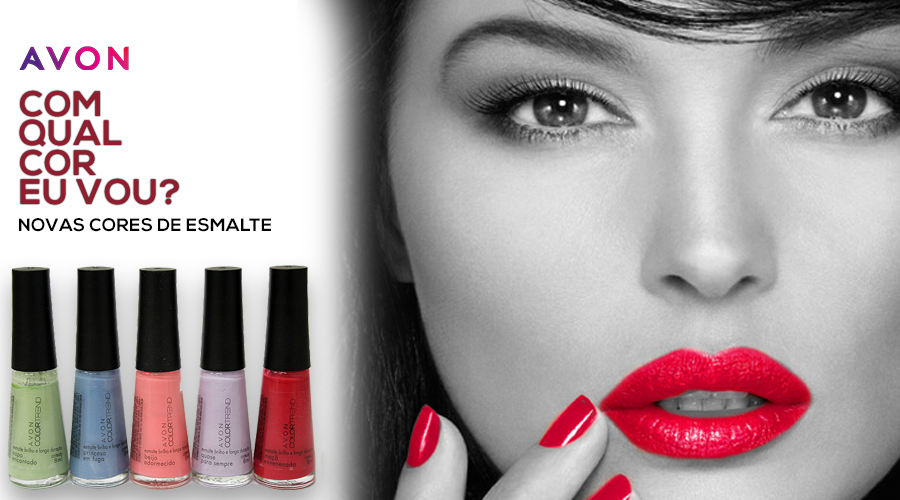
<style>
.page{position:relative;width:900px;height:500px}
.page>*{position:absolute;margin:0}
.t1{font:35.5px/29.3px "NexaBold";letter-spacing:0.02em;color:#901e2e}
.t2{font:18px "NexaBold";letter-spacing:0.02em;color:#000000}
</style>
<div class="page">
<p class="t1" style="left:19px;top:90px;width:160px;height:115px">COM <br>QUAL<br>COR<br>EU VOU?</p>
<p class="t2" style="left:19px;top:218px;width:252px;height:14px">NOVAS CORES DE ESMALTE</p>
</div>
